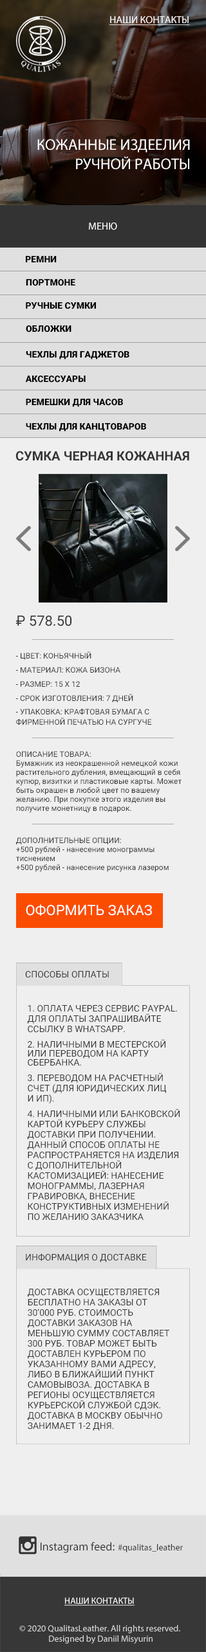
<style>
.page{position:relative;width:206px;height:1652px;background:#efefef}
.page>*{position:absolute;margin:0}
.t1{font:10.3px "MyriadPro-Regular";color:#ffffff;text-transform:uppercase;text-decoration:underline}
.t2{font:15.4px/19.3px "MyriadPro-Regular";color:#ffffff;text-transform:uppercase}
.t3{font:10.3px "MyriadPro-Regular";color:#ffffff;text-transform:uppercase}
.t4{font:9px "Roboto-Black";color:#000000;text-transform:uppercase}
.t5{font:12.9px "Roboto-Bold";color:#353535;text-transform:uppercase}
.t6{font:14.1px "Roboto-Regular";color:#353535;text-transform:uppercase}
.t7{font:7.7px "Roboto-Regular";color:#353535;text-transform:uppercase}
.t8{font:7.7px/10.3px "Roboto-Regular";color:#353535;text-transform:uppercase}
.t9{font:7.7px/38.6px "Roboto-Regular";color:#353535;text-transform:uppercase}
.t10{font:7.7px/9px "Roboto-Regular";color:#353535}
.t11{font:7.7px/9px "Roboto-Regular";color:#353535;text-transform:uppercase}
.t12{font:14.1px "Roboto-Regular";color:#ffffff;text-transform:uppercase}
.t13{font:9px "Roboto-Regular";color:#333333;text-transform:uppercase}
.t14{font:9px/10.3px "Roboto-Regular";color:#333333;text-transform:uppercase}
.t15{font:9px/15.4px "Roboto-Regular";color:#333333;text-transform:uppercase}
.t16{font:9px/9px "Roboto-Regular";color:#333333;text-transform:uppercase}
.t17{font:9px "MyriadPro-Regular";color:#333333}
.t18{font:15.4px "MyriadPro-Regular";color:#333333}
.t19{font:11.6px "MyriadPro-Regular";color:#333333}
.t20{font:9px "MyriadPro-Regular";color:#ffffff;text-transform:uppercase;text-decoration:underline}
.t21{font:9px/10.3px "MyriadPro-Regular";color:#dad9d9}
</style>
<div class="page">
<p class="t1" style="left:109px;top:16px;width:81px;height:9px">НАШИ КОНТАКТЫ</p>
<p class="t2" style="left:37px;top:139px;width:153px;height:31px;text-align:right">Кожанные издеелия<br>ручной работы</p>
<p class="t3" style="left:89px;top:222px;width:28px;height:8px">Меню</p>
<p class="t4" style="left:26px;top:256px;width:31px;height:6px">РЕМНИ</p>
<p class="t4" style="left:26px;top:279px;width:49px;height:7px">ПОРТМОНЕ</p>
<p class="t4" style="left:26px;top:302px;width:70px;height:7px">РУЧНЫЕ СУМКИ</p>
<p class="t4" style="left:26px;top:325px;width:45px;height:7px">ОБЛОЖКИ</p>
<p class="t4" style="left:26px;top:351px;width:103px;height:8px">ЧЕХЛЫ ДЛЯ ГАДЖЕТОВ</p>
<p class="t4" style="left:25px;top:375px;width:61px;height:7px">АКСЕСсУАРЫ</p>
<p class="t4" style="left:26px;top:399px;width:97px;height:8px">РЕМЕШКИ ДЛЯ ЧАСОВ</p>
<p class="t4" style="left:26px;top:423px;width:120px;height:8px">ЧЕХЛЫ ДЛЯ КАНЦТОВАРОВ</p>
<p class="t5" style="left:15px;top:451px;width:174px;height:10px">Сумка черная кожанная</p>
<p class="t6" style="left:16px;top:615px;width:55px;height:11px">₽ 578.50</p>
<p class="t7" style="left:16px;top:651px;width:75px;height:9px">- цвет: коньячный</p>
<p class="t7" style="left:16px;top:667px;width:104px;height:5px">- материал: кожа бизона</p>
<p class="t7" style="left:16px;top:681px;width:64px;height:6px">- размер: 15 х 12</p>
<p class="t7" style="left:16px;top:694px;width:117px;height:8px">- срок изготовления: 7 дней</p>
<p class="t8" style="left:16px;top:708px;width:136px;height:17px"><span class="t9">-</span> упаковка: крафтовая бумага с <br>фирменной печатью На сургуче</p>
<p class="t10" style="left:15px;top:751px;width:166px;height:62px"><span class="t11">описание товара: </span><br>Бумажник из неокрашенной немецкой кожи <br>растительного дубления, вмещающий в себя <br>купюр, визитки и пластиковые карты. Может <br>быть окрашен в любой цвет по вашему <br>желанию. При покупке этого изделия вы <br>получите монетницу в подарок.</p>
<p class="t10" style="left:16px;top:837px;width:152px;height:35px"><span class="t11">Дополнительные опции:  </span><br>+500 рублей - нанесение монограммы <br>тиснением<br>+500 рублей - нанесение рисунка лазером</p>
<p class="t12" style="left:26px;top:904px;width:126px;height:11px">оформить заказ</p>
<p class="t13" style="left:25px;top:971px;width:84px;height:7px">способы оплаты</p>
<p class="t14" style="left:27px;top:1005px;width:152px;height:215px">1. Оплата через сервис PayPal. <br>Для оплаты запрашивайте <br>ссылку в WhatsApp.<br><span class="t15">2. Наличными в местерской <br></span><span class="t16">или переводом на карту <br>Сбербанка.<br></span><span class="t15">3. Переводом на расчетный <br></span>счет (для юридических лиц <br>и ИП).<br><span class="t15">4. Наличными или банковской <br></span>картой курьеру службы <br>доставки при получении. <br>Данный способ оплаты не <br>распространяется на изделия <br>с дополнительной <br>кастомизацией: нанесение <br>монограммы, лазерная <br>гравировка, внесение <br>конструктивных изменений <br>по желанию заказчика</p>
<p class="t13" style="left:26px;top:1253px;width:121px;height:9px">информация о доставке</p>
<p class="t14" style="left:28px;top:1288px;width:141px;height:142px">Доставка осуществляется <br>бесплатно на заказы от <br>30’000 руб. Стоимость <br>доставки заказов на <br>меньшую сумму составляет <br>300 руб. Товар может быть <br>доставлен курьером по <br>указанному Вами адресу, <br>либо в ближайший пункт <br>самовывоза. Доставка в <br>регионы осуществляется <br>курьерской службой СДЭК. <br>Доставка в Москву обычно <br>занимает 1-2 дня.</p>
<p class="t17" style="left:40px;top:1542px;width:143px;height:11px"><span class="t18"><br></span><span class="t19">Instagram feed: </span>#qualitas_leather</p>
<p class="t20" style="left:64px;top:1597px;width:70px;height:8px">Наши контакты</p>
<p class="t21" style="left:19px;top:1625px;width:161px;height:18px;text-align:center">© 2020 QualitasLeather. All rights reserved. <br>Designed by Daniil Misyurin</p>
</div>
